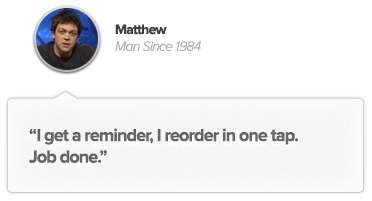
<style>
.page{position:relative;width:372px;height:201px;background:#ffffff}
.page>*{position:absolute;margin:0}
.t1{font:14px "ProximaNova-LightIt";letter-spacing:-0.05em;color:#a7a7a7}
.t2{font:14px "ProximaNova-Bold";letter-spacing:-0.05em;color:#3f3f3f}
.t3{font:18px "ProximaNova-Bold";letter-spacing:-0.05em;color:#696969}
</style>
<div class="page">
<p class="t1" style="left:115px;top:24px;width:86px;height:27px"><span class="t2">Matthew<br></span>Man Since 1984</p>
<p class="t3" style="left:29px;top:128px;width:269px;height:35px">“I get a reminder, I reorder in one tap.<br>Job done.”</p>
</div>
